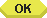
<style>
.page{position:relative;width:47px;height:18px;background:#e8e84c}
.page>*{position:absolute;margin:0}
.t1{font:12px "Arial-BoldMT";color:#232323}
</style>
<div class="page">
<p class="t1" style="left:15px;top:4px;width:16px;height:9px">OK</p>
</div>
